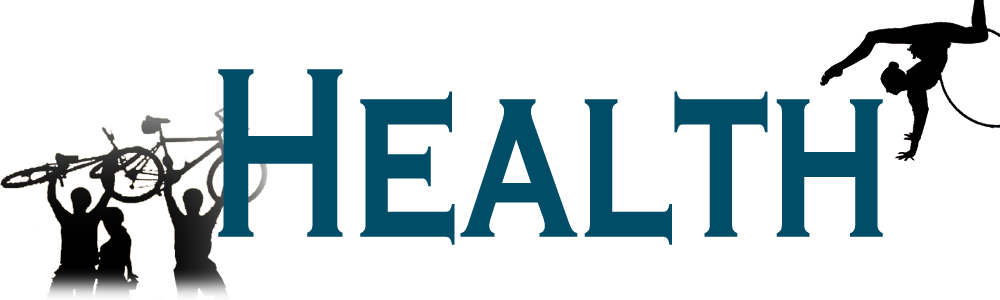
<style>
.page{position:relative;width:1000px;height:300px;background:#ffffff}
.page>*{position:absolute;margin:0}
.t1{font:251.1px "CopperplateGothic-Bold";color:#014d67;scale:0.67 1}
</style>
<div class="page">
<p class="t1" style="left:218px;top:69px;width:665px;height:176px">Health</p>
</div>
